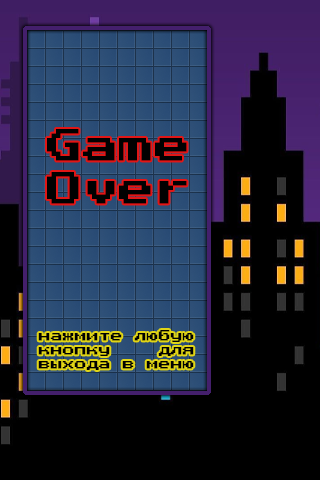
<style>
.page{position:relative;width:320px;height:480px;background:#000000}
.page>*{position:absolute;margin:0}
.t1{font:36px "PressStart2P-Regular";color:#010101}
.t2{font:12px "PressStart2P-Regular";color:#010101}
</style>
<div class="page">
<p class="t1" style="left:47px;top:129px;width:140px;height:75px">Game<br>Over</p>
<p class="t2" style="left:38px;top:330px;width:156px;height:40px">нажмите любую<br>кнопку    для<br>выхода в меню</p>
</div>
